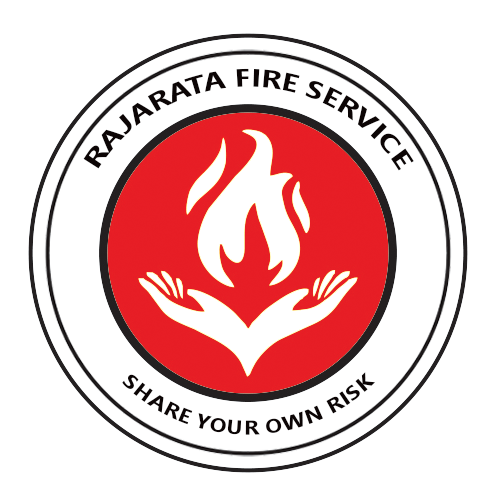
<style>
.page{position:relative;width:497px;height:500px;background:#ffffff}
.page>*{position:absolute;margin:0}
.t1{font:25px/62.4px "NirmalaUI-Bold";color:#0c0505;text-transform:uppercase}
.t2{font:20px/49.8px "NirmalaUI-Bold";color:#0c0505;text-transform:uppercase}
</style>
<div class="page">
<p class="t1" style="left:83px;top:68px;width:331px;height:103px;text-align:center">Rajarata Fire Service</p>
<p class="t2" style="left:122px;top:372px;width:254px;height:63px;text-align:center">Share Your Own Risk</p>
</div>
